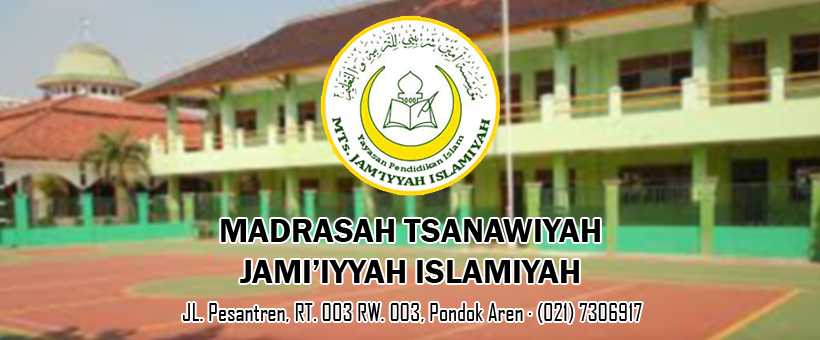
<style>
.page{position:relative;width:820px;height:340px}
.page>*{position:absolute;margin:0}
.t1{font:34px "FranklinGothic-Demi";color:#000000}
.t2{font:24px "AgencyFB-Reg";color:#000000}
</style>
<div class="page">
<p class="t1" style="left:221px;top:219px;width:379px;height:64px;text-align:center">MADRASAH TSANAWIYAH<br>JAMI’IYYAH ISLAMIYAH</p>
<p class="t2" style="left:182px;top:303px;width:460px;height:20px">JL. Pesantren, RT. 003 RW. 003, Pondok Aren · (021) 7306917</p>
</div>
